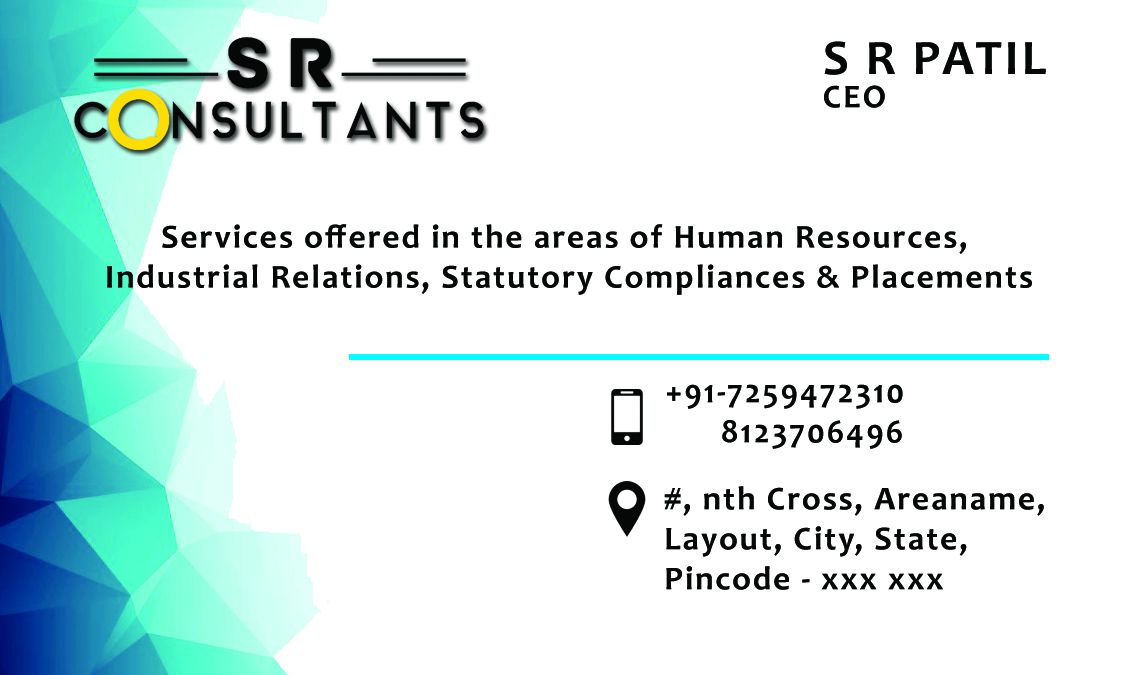
<style>
.page{position:relative;width:1125px;height:675px;background:#ffffff}
.page>*{position:absolute;margin:0}
.t1{font:50px/33.3px "Candara-Bold";letter-spacing:0.06em;color:#060808}
.t2{font:33.3px/33.3px "Candara-Bold";letter-spacing:0.06em;color:#060808}
.t3{font:33.3px "Candara-Bold";letter-spacing:0.06em;color:#060808}
</style>
<div class="page">
<p class="t1" style="left:824px;top:41px;width:222px;height:67px">S R PATIL<br><span class="t2">CEO</span></p>
<p class="t3" style="left:107px;top:224px;width:925px;height:71px;text-align:center">Services offered in the areas of Human Resources, <br>Industrial Relations, Statutory Compliances &amp; Placements</p>
<p class="t3" style="left:667px;top:384px;width:236px;height:65px">+91-7259472310<br>      8123706496</p>
<p class="t3" style="left:664px;top:486px;width:380px;height:104px">#, nth Cross, Areaname,<br>Layout, City, State, <br>Pincode - xxx xxx</p>
</div>
